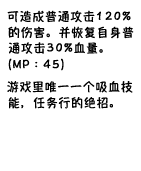
<style>
.page{position:relative;width:141px;height:171px;background:#ffffff}
.page>*{position:absolute;margin:0}
.t1{font:12px "HannotateSC-W7";letter-spacing:0.055em;color:#000000}
</style>
<div class="page">
<p class="t1" style="left:7px;top:10px;width:124px;height:13px">可造成普通攻击120%</p>
<p class="t1" style="left:8px;top:26px;width:126px;height:13px">的伤害。并恢复自身普</p>
<p class="t1" style="left:8px;top:42px;width:95px;height:12px">通攻击30%血量。</p>
<p class="t1" style="left:8px;top:58px;width:56px;height:13px">（MP：45）</p>
<p class="t1" style="left:7px;top:81px;width:126px;height:12px">游戏里唯一一个吸血技</p>
<p class="t1" style="left:8px;top:97px;width:105px;height:12px">能，任务行的绝招。</p>
</div>
